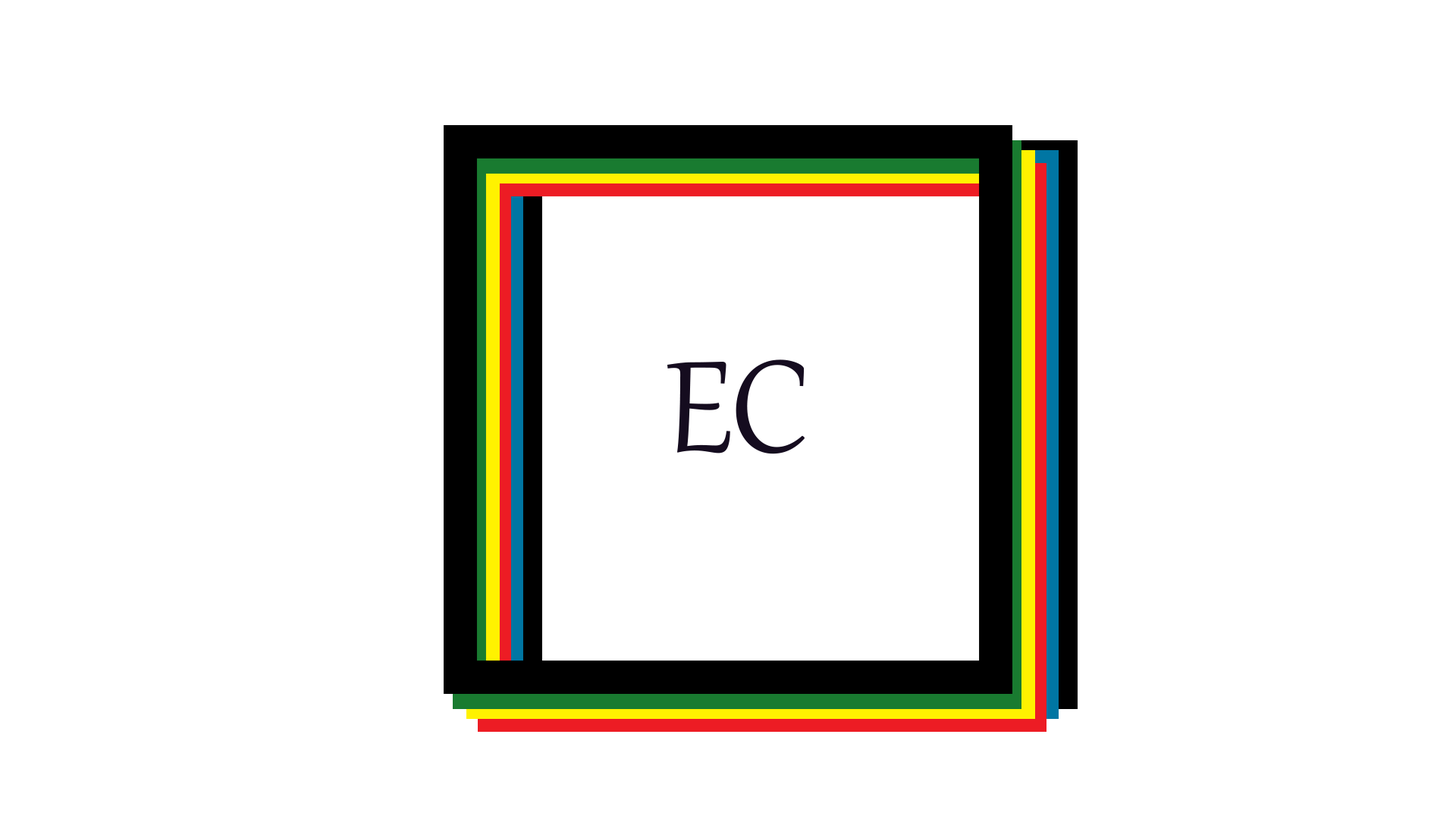
<style>
.page{position:relative;width:1456px;height:819px;background:#ffffff}
.page>*{position:absolute;margin:0}
.t1{font:159.2px "Gabriola";color:#150c1f}
</style>
<div class="page">
<p class="t1" style="left:667px;top:359px;width:138px;height:95px">EC</p>
</div>
